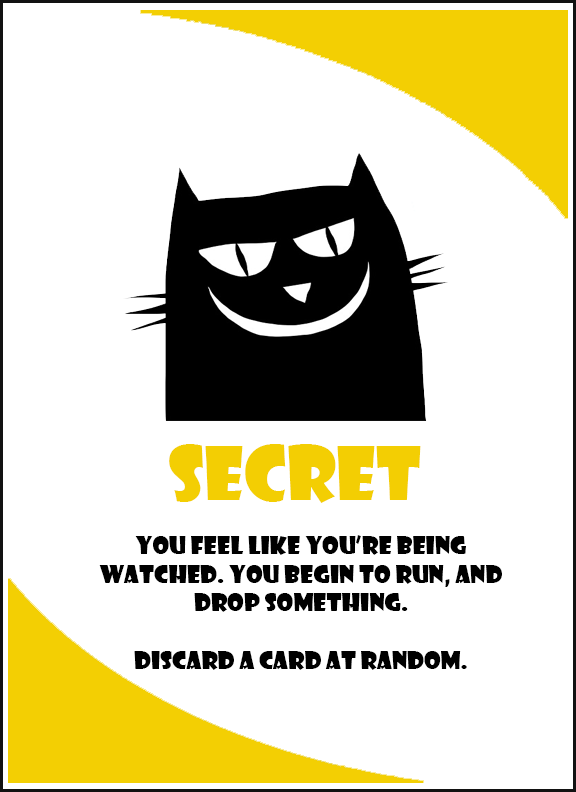
<style>
.page{position:relative;width:576px;height:792px;background:#ffffff}
.page>*{position:absolute;margin:0}
.t1{font:72px "ShowcardGothic-Reg";color:#f3ce03}
.t2{font:24px "ShowcardGothic-Reg";color:#000000}
</style>
<div class="page">
<p class="t1" style="left:169px;top:444px;width:252px;height:59px">SECRET</p>
<p class="t2" style="left:99px;top:535px;width:403px;height:135px;text-align:center">You feel like you’re being watched. You begin to run, and drop something.<br><br>Discard a card at random.</p>
</div>
